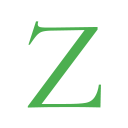
<style>
.page{position:relative;width:128px;height:128px;background:#ffffff}
.page>*{position:absolute;margin:0}
.t1{font:128px "STKaiti";color:#4caf50}
</style>
<div class="page">
<p class="t1" style="left:27px;top:21px;width:74px;height:87px">Z</p>
</div>
